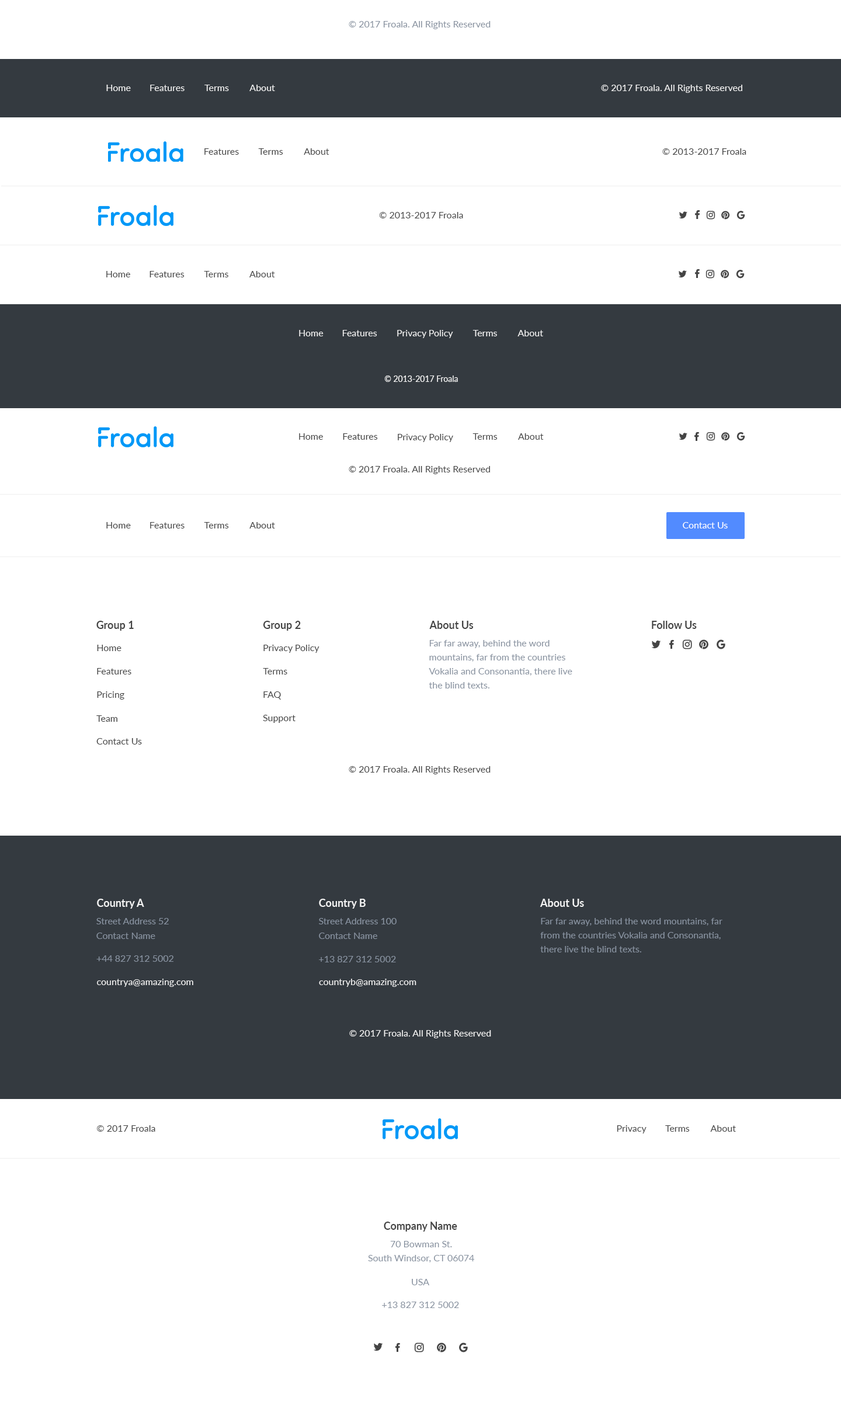
<style>
.page{position:relative;width:841px;height:1419px;background:#ffffff}
.page>*{position:absolute;margin:0}
.t1{font:9.3px "Lato-Regular";color:#8892a0}
.t2{font:9.3px "Lato-Regular";color:#f2f2f2}
.t3{font:9.2px "Lato-Regular";color:#444444}
.t4{font:9.3px "Lato-Regular";color:#444444}
.t5{font:8.2px "Lato-Regular";color:#f2f2f2}
.t6{font:9.4px "Lato-Regular";color:#444444}
.t7{font:9.3px "Lato-Regular";color:#ffffff}
.t8{font:10.5px "Lato-Bold";color:#444444}
.t9{font:9.3px/14px "Lato-Regular";color:#8892a0}
.t10{font:10.5px "Lato-Bold";color:#f2f2f2}
.t11{font:9.3px/14.6px "Lato-Regular";color:#8892a0}
.t12{font:9.4px/14.6px "Lato-Regular";color:#8892a0}
.t13{font:9.4px "Lato-Regular";color:#8892a0}
.t14{font:9.4px "Lato-Regular";color:#f2f2f2}
.t15{font:10.4px "Lato-Bold";color:#444444}
</style>
<div class="page">
<p class="t1" style="left:349px;top:21px;width:141px;height:8px">© 2017 Froala. All Rights Reserved</p>
<p class="t2" style="left:106px;top:85px;width:25px;height:6px">Home</p>
<p class="t2" style="left:150px;top:85px;width:34px;height:6px">Features</p>
<p class="t2" style="left:204px;top:85px;width:25px;height:6px">Terms</p>
<p class="t2" style="left:249px;top:85px;width:26px;height:6px">About</p>
<p class="t2" style="left:601px;top:85px;width:141px;height:8px">© 2017 Froala. All Rights Reserved</p>
<p class="t3" style="left:204px;top:148px;width:35px;height:7px">Features</p>
<p class="t3" style="left:258px;top:148px;width:25px;height:7px">Terms</p>
<p class="t3" style="left:304px;top:148px;width:25px;height:7px">About</p>
<p class="t4" style="left:662px;top:148px;width:84px;height:7px">© 2013-2017 Froala</p>
<p class="t4" style="left:379px;top:212px;width:84px;height:6px">© 2013-2017 Froala</p>
<p class="t4" style="left:106px;top:271px;width:24px;height:6px">Home</p>
<p class="t3" style="left:149px;top:271px;width:35px;height:6px">Features</p>
<p class="t3" style="left:204px;top:271px;width:24px;height:6px">Terms</p>
<p class="t3" style="left:249px;top:271px;width:26px;height:6px">About</p>
<p class="t2" style="left:299px;top:330px;width:24px;height:6px">Home</p>
<p class="t2" style="left:342px;top:330px;width:35px;height:6px">Features</p>
<p class="t2" style="left:397px;top:330px;width:56px;height:8px">Privacy Policy</p>
<p class="t2" style="left:472px;top:330px;width:25px;height:6px">Terms</p>
<p class="t2" style="left:517px;top:330px;width:26px;height:6px">About</p>
<p class="t5" style="left:384px;top:375px;width:74px;height:7px">© 2013-2017 Froala</p>
<p class="t4" style="left:299px;top:433px;width:24px;height:7px">Home</p>
<p class="t3" style="left:343px;top:433px;width:35px;height:7px">Features</p>
<p class="t4" style="left:398px;top:434px;width:55px;height:8px">Privacy Policy</p>
<p class="t4" style="left:472px;top:433px;width:25px;height:7px">Terms</p>
<p class="t4" style="left:518px;top:433px;width:25px;height:7px">About</p>
<p class="t4" style="left:349px;top:466px;width:141px;height:8px">© 2017 Froala. All Rights Reserved</p>
<p class="t6" style="left:106px;top:522px;width:25px;height:6px">Home</p>
<p class="t4" style="left:150px;top:522px;width:34px;height:6px">Features</p>
<p class="t4" style="left:204px;top:522px;width:25px;height:6px">Terms</p>
<p class="t4" style="left:249px;top:522px;width:26px;height:6px">About</p>
<p class="t7" style="left:682px;top:522px;width:45px;height:6px">Contact Us</p>
<p class="t8" style="left:96px;top:621px;width:38px;height:9px">Group 1</p>
<p class="t8" style="left:263px;top:621px;width:38px;height:9px">Group 2</p>
<p class="t8" style="left:429px;top:621px;width:44px;height:8px">About Us</p>
<p class="t8" style="left:651px;top:621px;width:45px;height:8px">Follow Us</p>
<p class="t9" style="left:428px;top:640px;width:144px;height:48px">Far far away, behind the word <br>mountains, far from the countries <br>Vokalia and Consonantia, there live <br>the blind texts.</p>
<p class="t4" style="left:97px;top:644px;width:24px;height:7px">Home</p>
<p class="t4" style="left:263px;top:644px;width:56px;height:9px">Privacy Policy</p>
<p class="t4" style="left:97px;top:668px;width:34px;height:6px">Features</p>
<p class="t4" style="left:263px;top:668px;width:24px;height:6px">Terms</p>
<p class="t4" style="left:97px;top:691px;width:27px;height:8px">Pricing</p>
<p class="t4" style="left:263px;top:691px;width:18px;height:8px">FAQ</p>
<p class="t4" style="left:96px;top:715px;width:21px;height:7px">Team</p>
<p class="t4" style="left:263px;top:715px;width:32px;height:8px">Support</p>
<p class="t4" style="left:96px;top:738px;width:46px;height:6px">Contact Us</p>
<p class="t4" style="left:349px;top:766px;width:141px;height:8px">© 2017 Froala. All Rights Reserved</p>
<p class="t10" style="left:97px;top:898px;width:47px;height:10px">Country A</p>
<p class="t10" style="left:319px;top:898px;width:46px;height:10px">Country B</p>
<p class="t10" style="left:539px;top:898px;width:45px;height:9px">About Us</p>
<p class="t11" style="left:96px;top:918px;width:73px;height:21px">Street Address 52<br>Contact Name</p>
<p class="t12" style="left:319px;top:918px;width:77px;height:21px">Street Address 100<br>Contact Name</p>
<p class="t9" style="left:540px;top:918px;width:182px;height:34px">Far far away, behind the word mountains, far <br>from the countries Vokalia and Consonantia, <br>there live the blind texts.</p>
<p class="t1" style="left:96px;top:955px;width:77px;height:6px">+44 827 312 5002</p>
<p class="t13" style="left:319px;top:956px;width:77px;height:6px">+13 827 312 5002</p>
<p class="t2" style="left:97px;top:978px;width:96px;height:9px">countrya@amazing.com</p>
<p class="t14" style="left:319px;top:978px;width:97px;height:9px">countryb@amazing.com</p>
<p class="t2" style="left:349px;top:1030px;width:142px;height:8px">© 2017 Froala. All Rights Reserved</p>
<p class="t4" style="left:97px;top:1125px;width:58px;height:6px">© 2017 Froala</p>
<p class="t4" style="left:616px;top:1125px;width:30px;height:8px">Privacy</p>
<p class="t4" style="left:665px;top:1125px;width:24px;height:6px">Terms</p>
<p class="t4" style="left:710px;top:1125px;width:26px;height:6px">About</p>
<p class="t15" style="left:384px;top:1221px;width:73px;height:10px">Company Name</p>
<p class="t9" style="left:368px;top:1240px;width:106px;height:22px;text-align:center">70 Bowman St.<br>South Windsor, CT 06074</p>
<p class="t1" style="left:412px;top:1278px;width:17px;height:7px">USA</p>
<p class="t1" style="left:382px;top:1301px;width:77px;height:7px">+13 827 312 5002</p>
</div>
